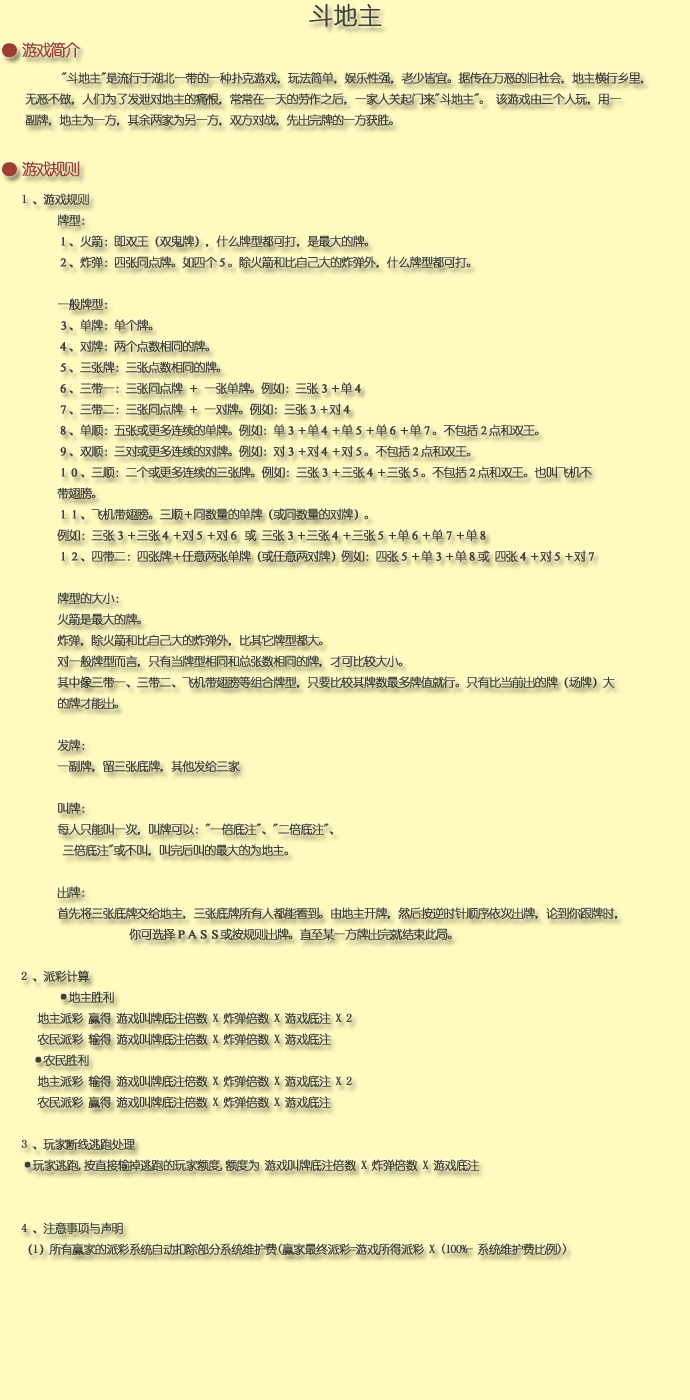
<style>
.page{position:relative;width:690px;height:1400px;background:#fffbbf}
.page>*{position:absolute;margin:0}
.t1{font:24px "YouYuan";color:#403f30;font-weight:bold}
.t2{font:16px "YouYuan";letter-spacing:-0.14em;color:#9c3f30;font-weight:bold}
.t3{font:12px "YouYuan";letter-spacing:-0.08em;color:#403f30;font-weight:bold}
</style>
<div class="page">
<p class="t1" style="left:309px;top:3px;width:73px;height:24px">斗地主</p>
<p class="t2" style="left:2px;top:42px;width:78px;height:16px">● 游戏简介</p>
<p class="t3" style="left:25px;top:72px;width:619px;height:54px">"斗地主"是流行于湖北一带的一种扑克游戏，玩法简单，娱乐性强，老少皆宜。据传在万恶的旧社会，地主横行乡里，<br>无恶不做，人们为了发泄对地主的痛恨，常常在一天的劳作之后，一家人关起门来"斗地主"。 该游戏由三个人玩，用一<br>副牌，地主为一方，其余两家为另一方，双方对战，先出完牌的一方获胜。</p>
<p class="t2" style="left:2px;top:161px;width:78px;height:16px">● 游戏规则</p>
<p class="t3" style="left:21px;top:193px;width:597px;height:1062px">1 、游戏规则<br> 牌型：<br> １、火箭：即双王（双鬼牌），什么牌型都可打，是最大的牌。<br> ２、炸弹：四张同点牌。如四个５。除火箭和比自己大的炸弹外，什么牌型都可打。<br><br> 一般牌型：<br> ３、单牌：单个牌。<br> ４、对牌：两个点数相同的牌。<br> ５、三张牌：三张点数相同的牌。<br> ６、三带一：三张同点牌 ＋ 一张单牌。例如：三张３＋单４<br> ７、三带二：三张同点牌 ＋ 一对牌。例如：三张３＋对４<br> ８、单顺：五张或更多连续的单牌。例如：单３＋单４＋单５＋单６＋单７。不包括２点和双王。<br> ９、双顺：三对或更多连续的对牌。例如：对３＋对４＋对５。不包括２点和双王。<br> １０、三顺：二个或更多连续的三张牌。例如：三张３＋三张４＋三张５。不包括２点和双王。也叫飞机不<br> 带翅膀。<br> １１、飞机带翅膀。三顺＋同数量的单牌（或同数量的对牌）。<br> 例如：三张３＋三张４＋对５＋对６ 或 三张３＋三张４＋三张５＋单６＋单７＋单８<br> １２、四带二：四张牌＋任意两张单牌（或任意两对牌）例如：四张５＋单３＋单８或 四张４＋对５＋对７<br><br> 牌型的大小：<br> 火箭是最大的牌。<br> 炸弹，除火箭和比自己大的炸弹外，比其它牌型都大。<br> 对一般牌型而言，只有当牌型相同和总张数相同的牌，才可比较大小。<br> 其中像三带一、三带二、飞机带翅膀等组合牌型，只要比较其牌数最多牌值就行。只有比当前出的牌（场牌）大<br> 的牌才能出。<br><br> 发牌：<br> 一副牌，留三张底牌，其他发给三家<br><br> 叫牌：<br> 每人只能叫一次，叫牌可以："一倍底注"、"二倍底注"、<br>  三倍底注"或不叫，叫完后叫的最大的为地主。<br><br> 出牌：<br> 首先将三张底牌交给地主，三张底牌所有人都能看到。由地主开牌，然后按逆时针顺序依次出牌，论到你跟牌时，<br>   你可选择ＰＡＳＳ或按规则出牌。直至某一方牌出完就结束此局。<br>  <br>2 、派彩计算<br> ·地主胜利<br>   地主派彩 赢得 游戏叫牌底注倍数 X 炸弹倍数 X 游戏底注 X 2<br>   农民派彩 输得 游戏叫牌底注倍数 X 炸弹倍数 X 游戏底注<br>  ·农民胜利 <br>   地主派彩 输得 游戏叫牌底注倍数 X 炸弹倍数 X 游戏底注 X 2<br>   农民派彩 赢得 游戏叫牌底注倍数 X 炸弹倍数 X 游戏底注<br><br>3 、玩家断线逃跑处理<br>·玩家逃跑,按直接输掉逃跑的玩家额度,额度为 游戏叫牌底注倍数 X 炸弹倍数 X 游戏底注<br><br><br>4 、注意事项与声明<br>（1）所有赢家的派彩系统自动扣除部分系统维护费(赢家最终派彩=游戏所得派彩 X (100%- 系统维护费比例))</p>
</div>
